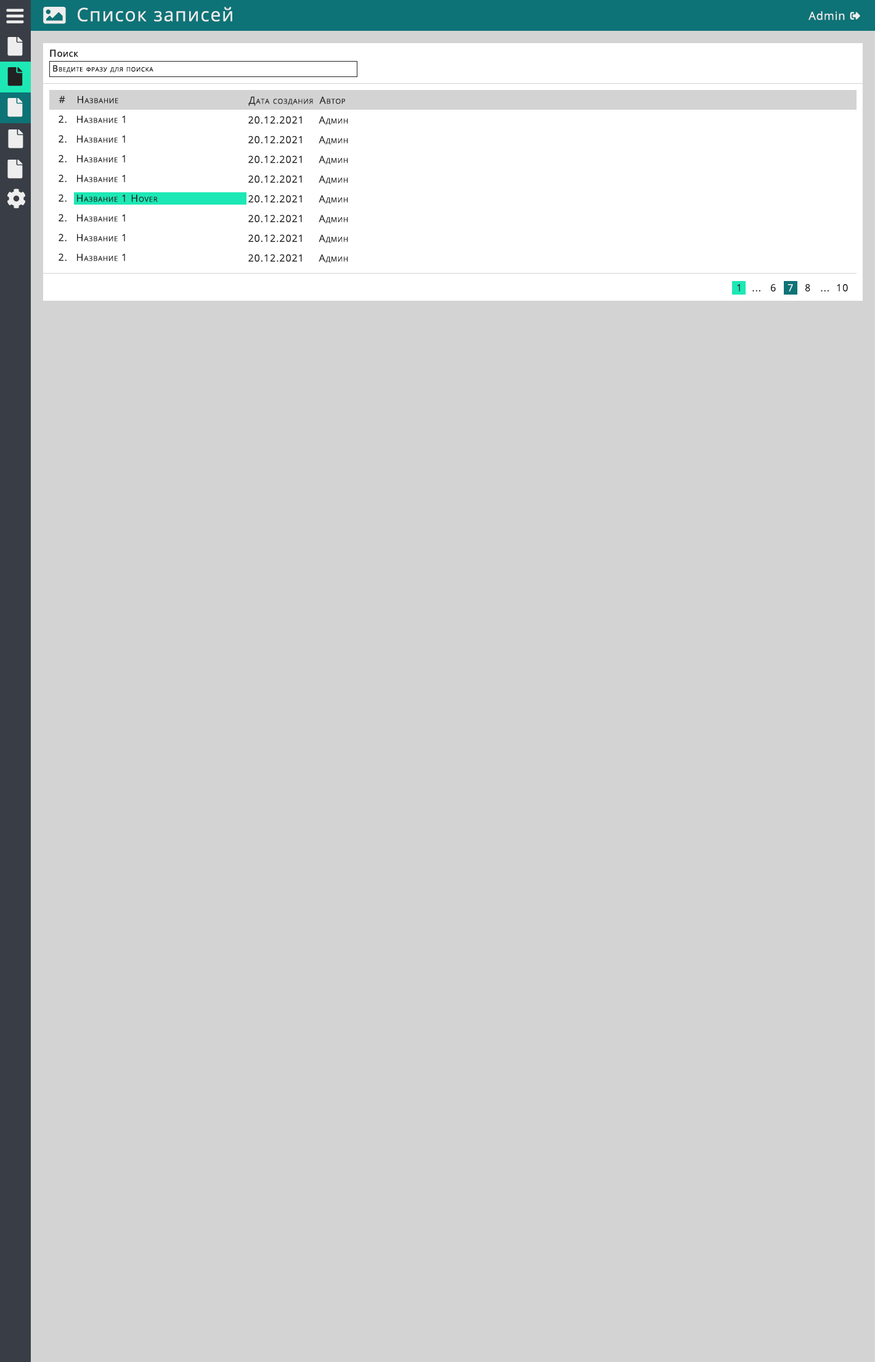
<style>
.page{position:relative;width:875px;height:1362px;background:#d3d3d3}
.page>*{position:absolute;margin:0}
.t1{font:18.5px "OpenSans-Regular";letter-spacing:0.06em;color:#eeeeee}
.t2{font:11.1px "OpenSans-Regular";letter-spacing:0.06em;color:#eeeeee}
.t3{font:9.9px "OpenSans-SemiBold";letter-spacing:0.06em;color:#212121;font-variant:small-caps}
.t4{font:8.6px "OpenSans-Regular";letter-spacing:0.06em;color:#000000;font-variant:small-caps}
.t5{font:9.9px "OpenSans-Regular";letter-spacing:0.06em;color:#212121;font-variant:small-caps}
.t6{font:9.9px "OpenSans-Regular";letter-spacing:0.06em;color:#eeeeee;font-variant:small-caps}
</style>
<div class="page">
<p class="t1" style="left:78px;top:7px;width:154px;height:15px">Список записей</p>
<p class="t2" style="left:809px;top:11px;width:36px;height:9px">Admin</p>
<p class="t3" style="left:50px;top:49px;width:28px;height:8px">Поиск</p>
<p class="t4" style="left:53px;top:65px;width:100px;height:8px">Введите фразу для поиска</p>
<p class="t5" style="left:59px;top:96px;width:6px;height:8px">#</p>
<p class="t5" style="left:78px;top:96px;width:40px;height:8px">Название</p>
<p class="t5" style="left:248px;top:96px;width:65px;height:10px">Дата создания</p>
<p class="t5" style="left:319px;top:96px;width:26px;height:8px">Автор</p>
<p class="t5" style="left:59px;top:115px;width:8px;height:8px">2.</p>
<p class="t5" style="left:77px;top:115px;width:48px;height:8px">Название 1</p>
<p class="t5" style="left:248px;top:116px;width:54px;height:8px">20.12.2021</p>
<p class="t5" style="left:319px;top:116px;width:29px;height:9px">Админ</p>
<p class="t5" style="left:59px;top:135px;width:8px;height:8px">2.</p>
<p class="t5" style="left:77px;top:135px;width:48px;height:8px">Название 1</p>
<p class="t5" style="left:248px;top:136px;width:54px;height:8px">20.12.2021</p>
<p class="t5" style="left:319px;top:136px;width:29px;height:9px">Админ</p>
<p class="t5" style="left:59px;top:155px;width:8px;height:8px">2.</p>
<p class="t5" style="left:77px;top:155px;width:48px;height:8px">Название 1</p>
<p class="t5" style="left:248px;top:155px;width:54px;height:8px">20.12.2021</p>
<p class="t5" style="left:319px;top:155px;width:29px;height:10px">Админ</p>
<p class="t5" style="left:59px;top:174px;width:8px;height:8px">2.</p>
<p class="t5" style="left:77px;top:174px;width:48px;height:8px">Название 1</p>
<p class="t5" style="left:248px;top:175px;width:54px;height:8px">20.12.2021</p>
<p class="t5" style="left:319px;top:175px;width:29px;height:9px">Админ</p>
<p class="t5" style="left:59px;top:194px;width:8px;height:8px">2.</p>
<p class="t5" style="left:77px;top:194px;width:81px;height:8px">Название 1 Hover</p>
<p class="t5" style="left:248px;top:195px;width:54px;height:8px">20.12.2021</p>
<p class="t5" style="left:319px;top:195px;width:29px;height:9px">Админ</p>
<p class="t5" style="left:59px;top:214px;width:8px;height:8px">2.</p>
<p class="t5" style="left:77px;top:214px;width:48px;height:8px">Название 1</p>
<p class="t5" style="left:248px;top:215px;width:54px;height:8px">20.12.2021</p>
<p class="t5" style="left:319px;top:215px;width:29px;height:9px">Админ</p>
<p class="t5" style="left:59px;top:234px;width:8px;height:8px">2.</p>
<p class="t5" style="left:77px;top:234px;width:48px;height:8px">Название 1</p>
<p class="t5" style="left:248px;top:234px;width:54px;height:8px">20.12.2021</p>
<p class="t5" style="left:319px;top:234px;width:29px;height:9px">Админ</p>
<p class="t5" style="left:59px;top:253px;width:8px;height:8px">2.</p>
<p class="t5" style="left:77px;top:253px;width:48px;height:8px">Название 1</p>
<p class="t5" style="left:248px;top:254px;width:54px;height:8px">20.12.2021</p>
<p class="t5" style="left:319px;top:254px;width:29px;height:9px">Админ</p>
<p class="t5" style="left:737px;top:284px;width:3px;height:8px">1</p>
<p class="t5" style="left:753px;top:290px;width:8px;height:2px">...</p>
<p class="t5" style="left:771px;top:284px;width:5px;height:8px">6</p>
<p class="t6" style="left:788px;top:284px;width:5px;height:8px">7</p>
<p class="t5" style="left:805px;top:284px;width:6px;height:8px">8</p>
<p class="t5" style="left:821px;top:290px;width:8px;height:2px">...</p>
<p class="t5" style="left:837px;top:284px;width:11px;height:8px">10</p>
</div>
